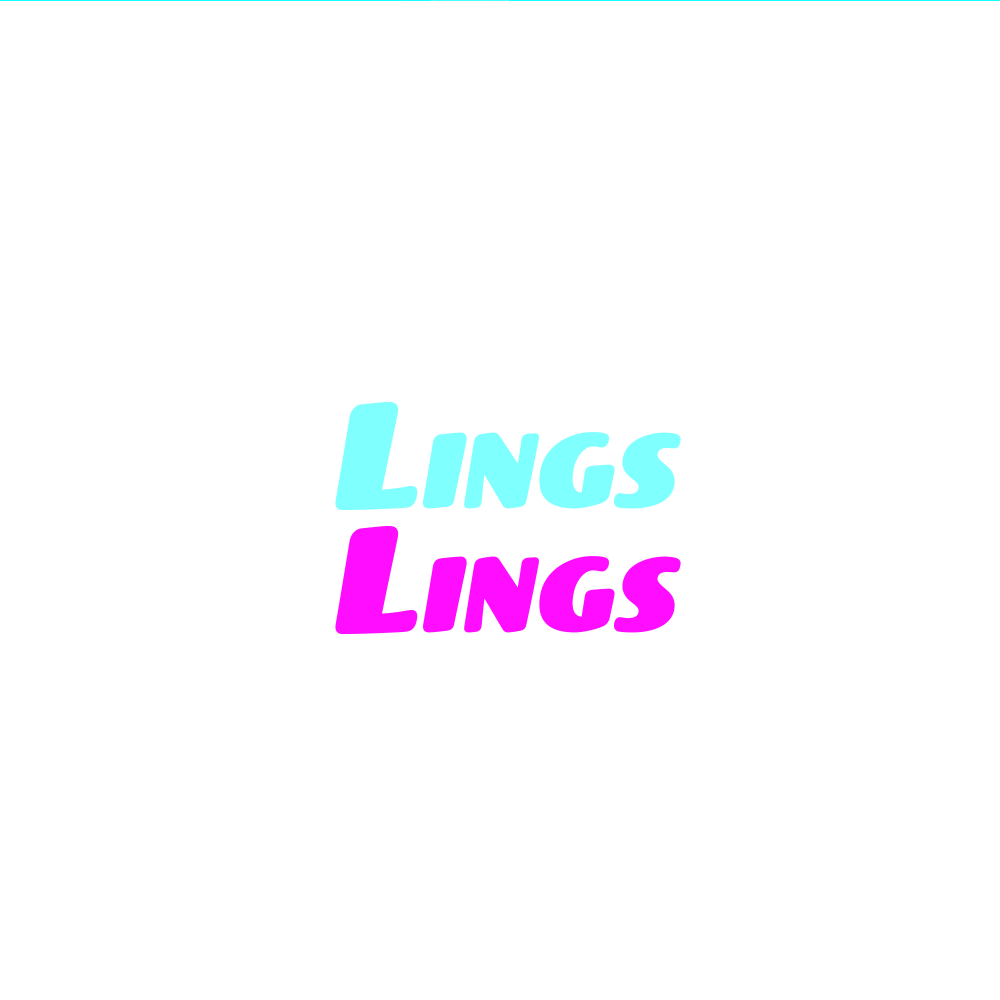
<style>
.page{position:relative;width:1000px;height:1000px;background:#ffffff}
.page>*{position:absolute;margin:0}
.t1{font:150px "Meatball";color:#80ffff;font-variant:small-caps;font-weight:bold;font-style:italic}
</style>
<div class="page">
<p class="t1" style="left:335px;top:400px;width:346px;height:110px">Lings</p>
</div>
